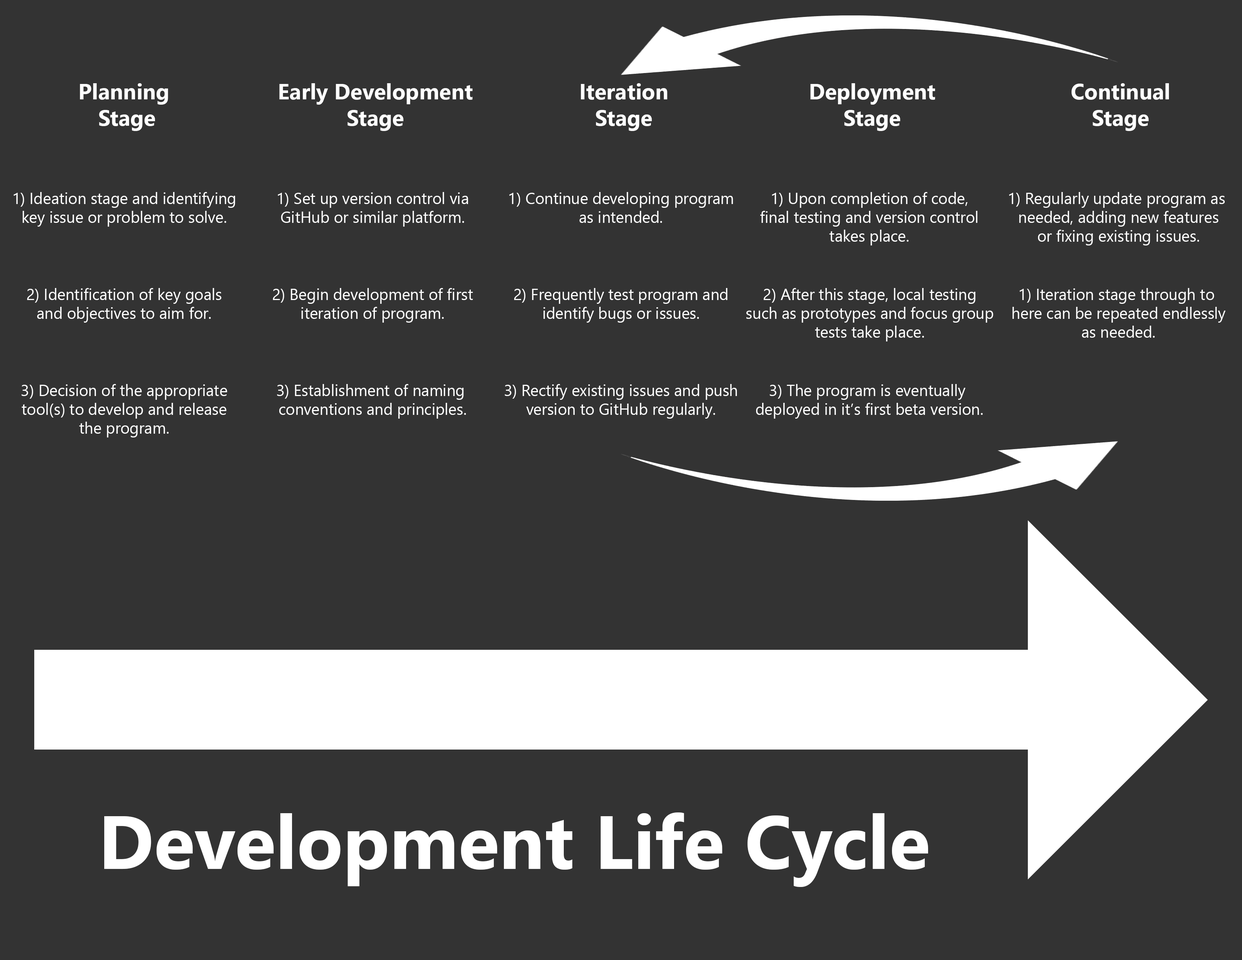
<style>
.page{position:relative;width:1242px;height:960px;background:#333333}
.page>*{position:absolute;margin:0}
.t1{font:22px "SegoeUI-Bold";color:#ffffff}
.t2{font:15.7px "SegoeUI";color:#ffffff}
.t3{font:75.3px "SegoeUI-Bold";color:#ffffff}
</style>
<div class="page">
<p class="t1" style="left:80px;top:83px;width:88px;height:48px;text-align:center">Planning <br>Stage</p>
<p class="t1" style="left:279px;top:83px;width:194px;height:48px;text-align:center">Early Development<br>Stage</p>
<p class="t1" style="left:581px;top:83px;width:86px;height:48px;text-align:center">Iteration<br>Stage</p>
<p class="t1" style="left:810px;top:83px;width:125px;height:48px;text-align:center">Deployment<br>Stage</p>
<p class="t1" style="left:1072px;top:83px;width:97px;height:48px;text-align:center">Continual<br>Stage</p>
<p class="t2" style="left:14px;top:192px;width:221px;height:35px;text-align:center">1) Ideation stage and identifying<br>key issue or problem to solve.</p>
<p class="t2" style="left:278px;top:192px;width:190px;height:35px;text-align:center">1) Set up version control via<br>GitHub or similar platform.</p>
<p class="t2" style="left:509px;top:192px;width:224px;height:31px;text-align:center">1) Continue developing program<br>as intended.</p>
<p class="t2" style="left:760px;top:192px;width:218px;height:53px;text-align:center">1) Upon completion of code,<br>final testing and version control<br>takes place.</p>
<p class="t2" style="left:1009px;top:192px;width:216px;height:53px;text-align:center">1) Regularly update program as <br>needed, adding new features<br>or fixing existing issues.</p>
<p class="t2" style="left:27px;top:288px;width:194px;height:35px;text-align:center">2) Identification of key goals<br>and objectives to aim for.</p>
<p class="t2" style="left:273px;top:288px;width:200px;height:35px;text-align:center">2) Begin development of first<br>iteration of program.</p>
<p class="t2" style="left:514px;top:288px;width:214px;height:35px;text-align:center">2) Frequently test program and<br>identify bugs or issues.</p>
<p class="t2" style="left:746px;top:288px;width:247px;height:53px;text-align:center">2) After this stage, local testing<br>such as prototypes and focus group<br>tests take place.</p>
<p class="t2" style="left:1013px;top:288px;width:213px;height:50px;text-align:center">1) Iteration stage through to <br>here can be repeated endlessly<br>as needed.</p>
<p class="t2" style="left:21px;top:384px;width:206px;height:53px;text-align:center">3) Decision of the appropriate<br>tool(s) to develop and release<br>the program.</p>
<p class="t2" style="left:277px;top:384px;width:189px;height:35px;text-align:center">3) Establishment of naming <br>conventions and principles.</p>
<p class="t2" style="left:505px;top:384px;width:232px;height:35px;text-align:center">3) Rectify existing issues and push<br>version to GitHub regularly.</p>
<p class="t2" style="left:756px;top:384px;width:227px;height:35px;text-align:center">3) The program is eventually <br>deployed in it’s first beta version.</p>
<p class="t3" style="left:104px;top:812px;width:824px;height:75px">Development Life Cycle</p>
</div>
